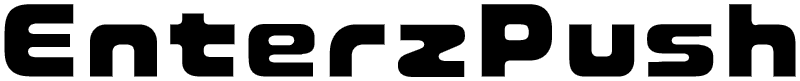
<style>
.page{position:relative;width:800px;height:81px;background:#ffffff}
.page>*{position:absolute;margin:0}
.t1{font:94.9px "VDL-LogoJrBlack-Black";color:#000000;font-weight:bold}
</style>
<div class="page">
<p class="t1" style="left:0px;top:0px;width:800px;height:81px">EnterzPush</p>
</div>
